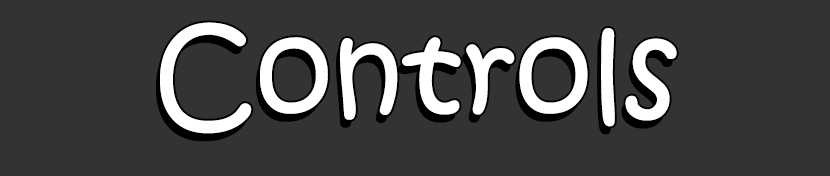
<style>
.page{position:relative;width:830px;height:176px;background:#333333}
.page>*{position:absolute;margin:0}
.t1{font:124.4px "KristenITC-Regular";color:#ffffff}
</style>
<div class="page">
<p class="t1" style="left:160px;top:22px;width:517px;height:112px">Controls</p>
</div>
